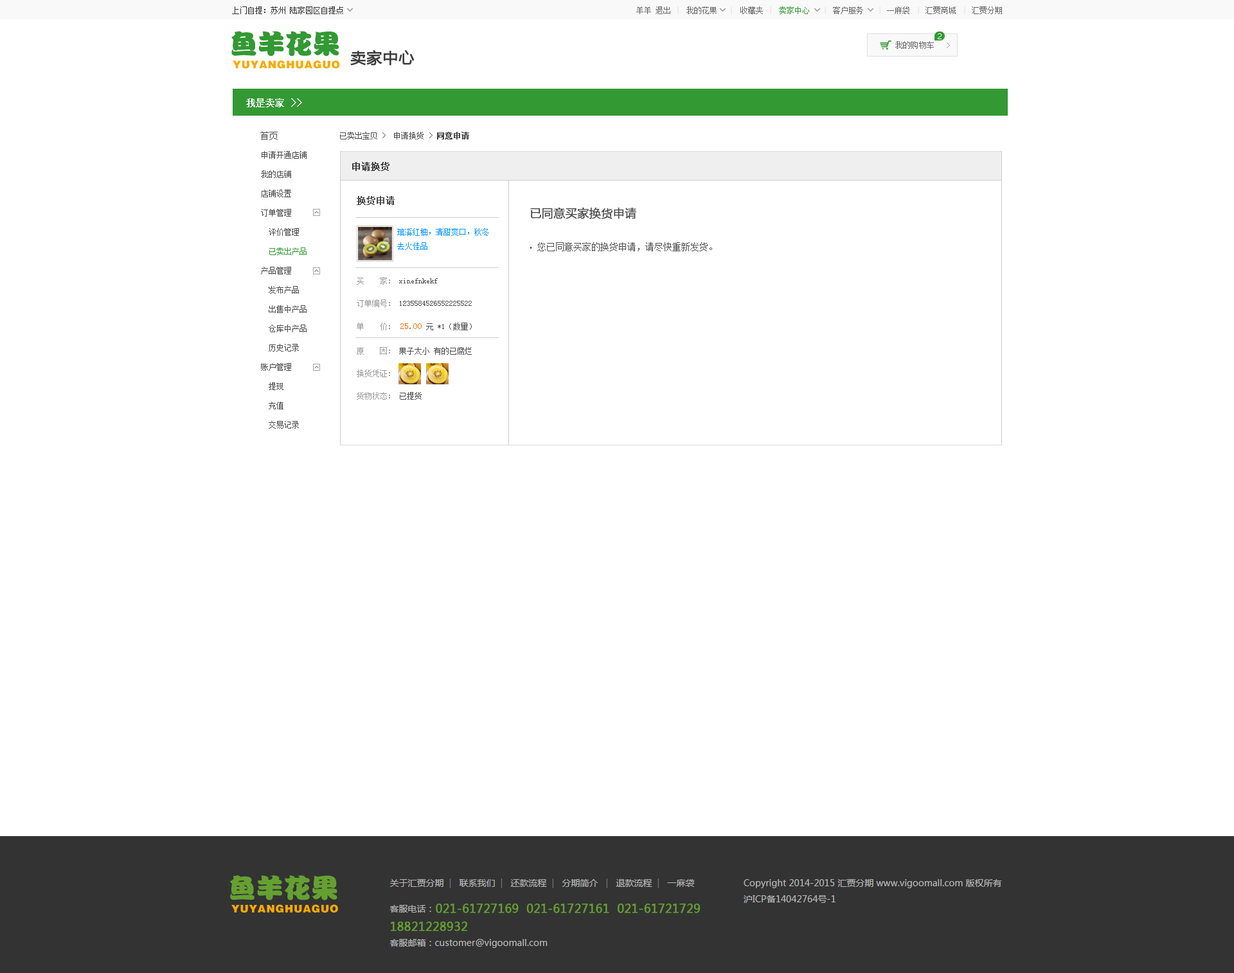
<style>
.page{position:relative;width:1234px;height:973px;background:#ffffff}
.page>*{position:absolute;margin:0}
.t1{font:9px "SimSun";color:#4b4b4b}
.t2{font:7.7px "SimSun";color:#4b4b4b}
.t3{font:7.7px "SimSun";color:#4b4b4b;font-weight:bold}
.t4{font:7.7px/19.3px "SimSun";color:#4b4b4b}
.t5{font:7.7px/19.3px "SimSun";color:#339933}
.t6{font:9px "SimSun";color:#3e3e3e;font-weight:bold}
.t7{font:9px "SimSun";color:#4b4b4b;font-weight:bold}
.t8{font:11.6px "MicrosoftYaHei";color:#4b4b4b;font-weight:bold}
.t9{font:7.7px/14.1px "SimSun";color:#0094ff}
.t10{font:7.7px/22.5px "SimSun";color:#4b4b4b}
.t11{font:7.7px/22.5px "SimSun";color:#9a9a9a}
.t12{font:7.7px/25.1px "SimSun";color:#9a9a9a}
.t13{font:9px/25.1px "SimSun";color:#ee7000}
.t14{font:7.7px/25.1px "SimSun";color:#4b4b4b}
</style>
<div class="page">
<p class="t1" style="left:260px;top:131px;width:18px;height:9px">首页</p>
<p class="t2" style="left:340px;top:132px;width:129px;height:8px">已卖出宝贝 〉 申请换货 〉<span class="t3">同意申请</span></p>
<p class="t4" style="left:261px;top:151px;width:46px;height:278px">申请开通店铺<br>我的店铺<br>店铺设置<br>订单管理<br>  评价管理<br><span class="t5">  已卖出产品<br></span>产品管理<br>  发布产品<br>  出售中产品<br>  仓库中产品<br>  历史记录<br>账户管理<br>  提现<br>  充值<br>  交易记录</p>
<p class="t6" style="left:352px;top:162px;width:38px;height:9px">申请换货</p>
<p class="t7" style="left:357px;top:196px;width:38px;height:9px">换货申请</p>
<p class="t8" style="left:530px;top:207px;width:106px;height:12px">已同意买家换货申请</p>
<p class="t9" style="left:397px;top:228px;width:92px;height:22px">琯溪红柚，清甜爽口，秋冬<br>去火佳品</p>
<p class="t1" style="left:537px;top:242px;width:175px;height:9px">您已同意买家的换货申请，请尽快重新发货。</p>
<p class="t10" style="left:357px;top:277px;width:115px;height:123px"><span class="t11">买    家：</span> xinefnkekf<br><span class="t11">订单编号：</span> 1235584526552225522<br><span class="t12">单    价： </span><span class="t13">25.00</span><span class="t14"> 元 *1（数量）<br></span><span class="t11">原    因：</span> 果子太小 有的已腐烂<br><span class="t11">换货凭证：<br>货物状态：</span> 已提货</p>
</div>
